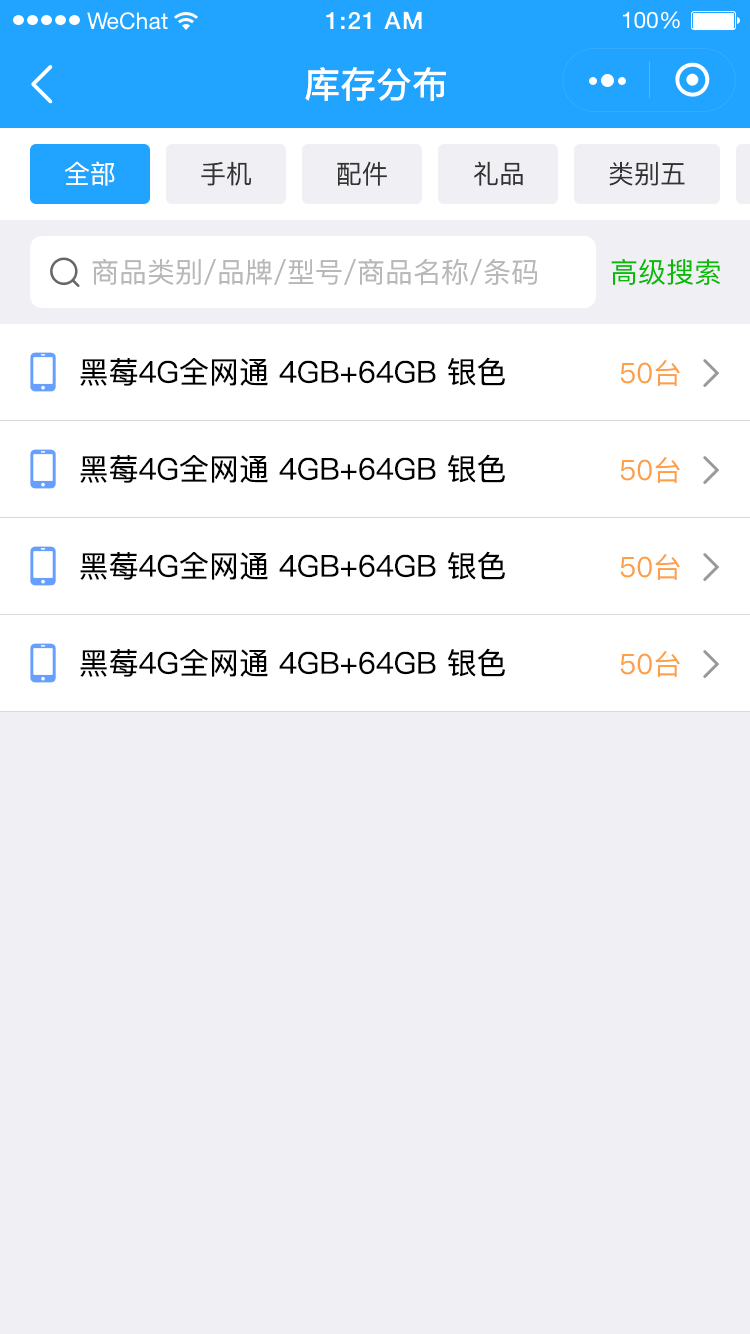
<style>
.page{position:relative;width:750px;height:1334px;background:#efeff4}
.page>*{position:absolute;margin:0}
.t1{font:36px "PingFang-SC-Bold";color:#ffffff}
.t2{font:26px "PingFang-SC-Medium";color:#ffffff}
.t3{font:26px "PingFang-SC-Medium";color:#333333}
.t4{font:28px "PingFang-SC-Medium";color:#b8b8b8}
.t5{font:28px "PingFang-SC-Medium";color:#09bb07}
.t6{font:30px "PingFang-SC-Medium";color:#000000}
.t7{font:28px "PingFang-SC-Medium";color:#fe9f45}
</style>
<div class="page">
<p class="t1" style="left:305px;top:67px;width:141px;height:34px">库存分布</p>
<p class="t2" style="left:65px;top:161px;width:50px;height:25px">全部</p>
<p class="t3" style="left:201px;top:161px;width:50px;height:25px">手机</p>
<p class="t3" style="left:337px;top:161px;width:50px;height:25px">配件</p>
<p class="t3" style="left:474px;top:161px;width:49px;height:25px">礼品</p>
<p class="t3" style="left:609px;top:161px;width:76px;height:25px">类别五</p>
<p class="t4" style="left:92px;top:258px;width:445px;height:27px">商品类别/品牌/型号/商品名称/条码</p>
<p class="t5" style="left:611px;top:259px;width:109px;height:26px">高级搜索</p>
<p class="t6" style="left:80px;top:357px;width:425px;height:29px">黑莓4G全网通 4GB+64GB 银色</p>
<p class="t7" style="left:620px;top:360px;width:60px;height:26px">50台</p>
<p class="t6" style="left:80px;top:454px;width:425px;height:29px">黑莓4G全网通 4GB+64GB 银色</p>
<p class="t7" style="left:620px;top:457px;width:60px;height:26px">50台</p>
<p class="t6" style="left:80px;top:551px;width:425px;height:29px">黑莓4G全网通 4GB+64GB 银色</p>
<p class="t7" style="left:620px;top:554px;width:60px;height:26px">50台</p>
<p class="t6" style="left:80px;top:648px;width:425px;height:29px">黑莓4G全网通 4GB+64GB 银色</p>
<p class="t7" style="left:620px;top:651px;width:60px;height:26px">50台</p>
</div>
